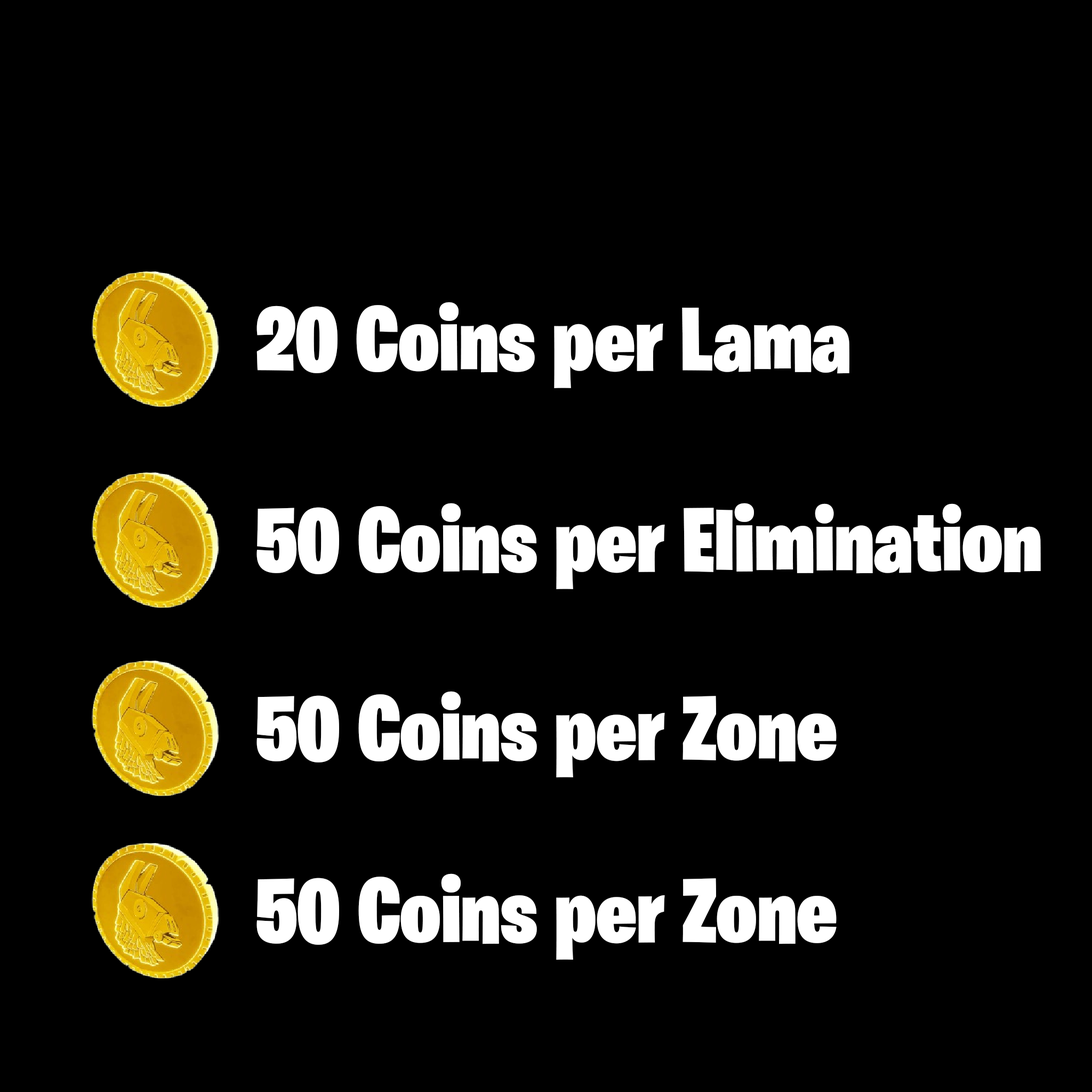
<style>
.page{position:relative;width:1092px;height:1092px;background:#000000}
.page>*{position:absolute;margin:0}
.t1{font:91.3px "BurbankBigCondensed-Black";color:#ffffff}
</style>
<div class="page">
<p class="t1" style="left:256px;top:302px;width:593px;height:86px">20 Coins per Lama</p>
<p class="t1" style="left:256px;top:503px;width:785px;height:86px">50 Coins per Elimination</p>
<p class="t1" style="left:256px;top:691px;width:581px;height:86px">50 Coins per Zone</p>
<p class="t1" style="left:256px;top:873px;width:581px;height:87px">50 Coins per Zone</p>
</div>
